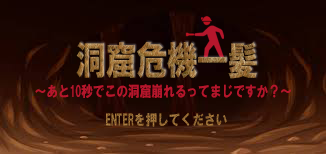
<style>
.page{position:relative;width:326px;height:154px}
.page>*{position:absolute;margin:0}
.t1{font:39px "HGSoeiKakugothicUB";letter-spacing:-0.025em;font-variant:small-caps;scale:0.8 1}
.t2{font:15px "HGSoeiKakugothicUB";letter-spacing:-0.025em;color:#b6162c;font-variant:small-caps;scale:0.8 1}
.t3{font:15px "HGSoeiKakugothicUB";letter-spacing:-0.025em;color:#956a34;font-variant:small-caps;scale:0.8 1}
</style>
<div class="page">
<p class="t1" style="left:76px;top:41px;width:181px;height:38px">洞窟危機一髪</p>
<p class="t2" style="left:35px;top:84px;width:256px;height:14px">～あと10秒でこの洞窟崩れるってまじですか？～</p>
<p class="t3" style="left:106px;top:112px;width:121px;height:15px">ENTERを押してください</p>
</div>
